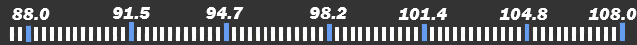
<style>
.page{position:relative;width:637px;height:45px;background:#333333}
.page>*{position:absolute;margin:0}
.t1{font:18px "FranklinGothic-HeavyItalic";color:#ffffff}
.t2{font:18px "FranklinGothic-HeavyItalic";color:#fefefe}
</style>
<div class="page">
<p class="t1" style="left:12px;top:8px;width:38px;height:12px">88.0</p>
<p class="t2" style="left:113px;top:7px;width:37px;height:12px">91.5</p>
<p class="t1" style="left:206px;top:7px;width:38px;height:12px">94.7</p>
<p class="t1" style="left:310px;top:7px;width:37px;height:12px">98.2</p>
<p class="t1" style="left:398px;top:8px;width:49px;height:12px">101.4</p>
<p class="t1" style="left:499px;top:8px;width:49px;height:12px">104.8</p>
<p class="t2" style="left:588px;top:8px;width:49px;height:12px">108.0</p>
</div>
